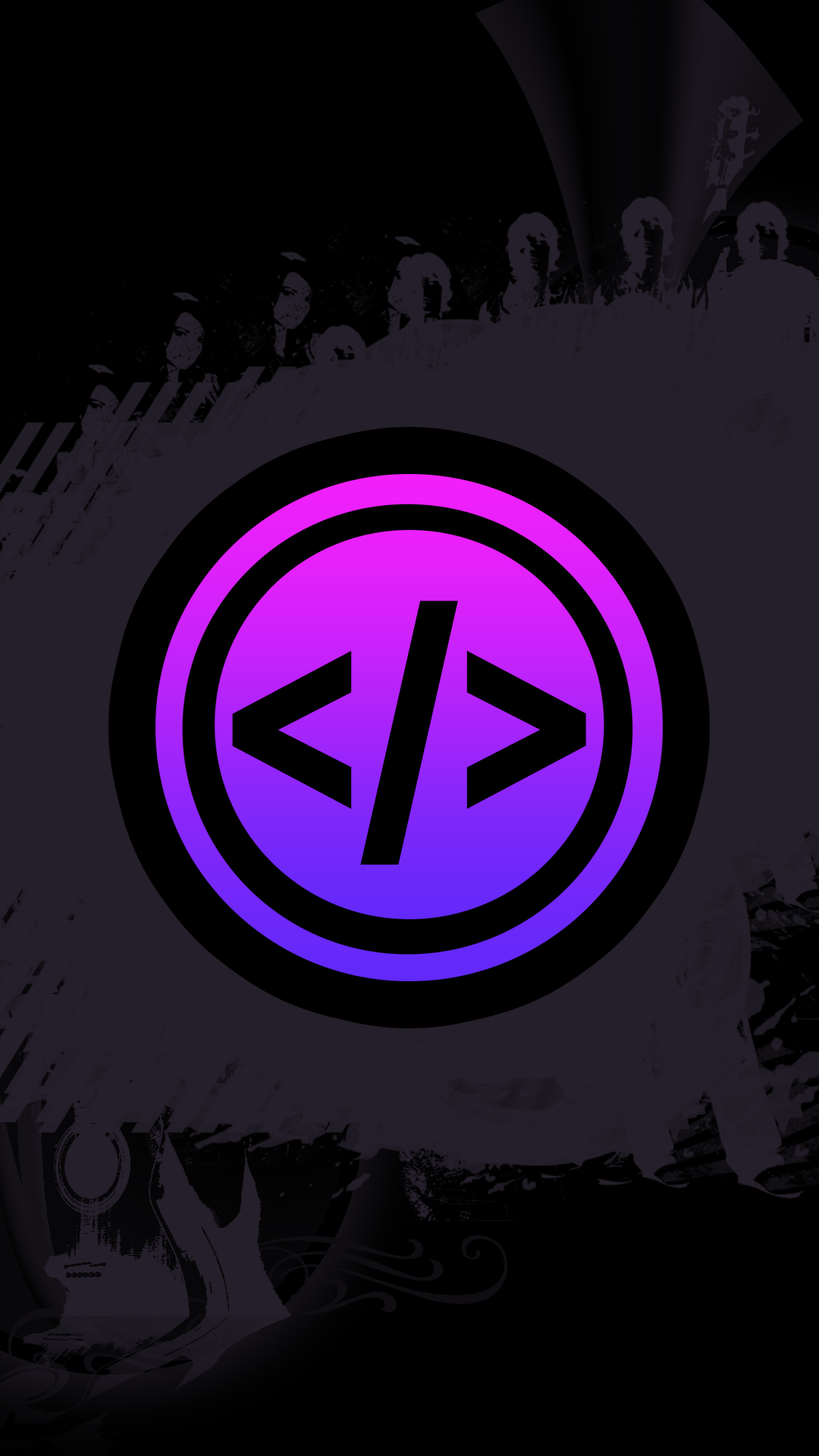
<style>
.page{position:relative;width:819px;height:1456px;background:#000000}
.page>*{position:absolute;margin:0}
.t1{font:321.1px "Impact";color:#000000;scale:0.79 1}
</style>
<div class="page">
<p class="t1" style="left:232px;top:601px;width:354px;height:264px">&lt;/&gt;</p>
</div>
